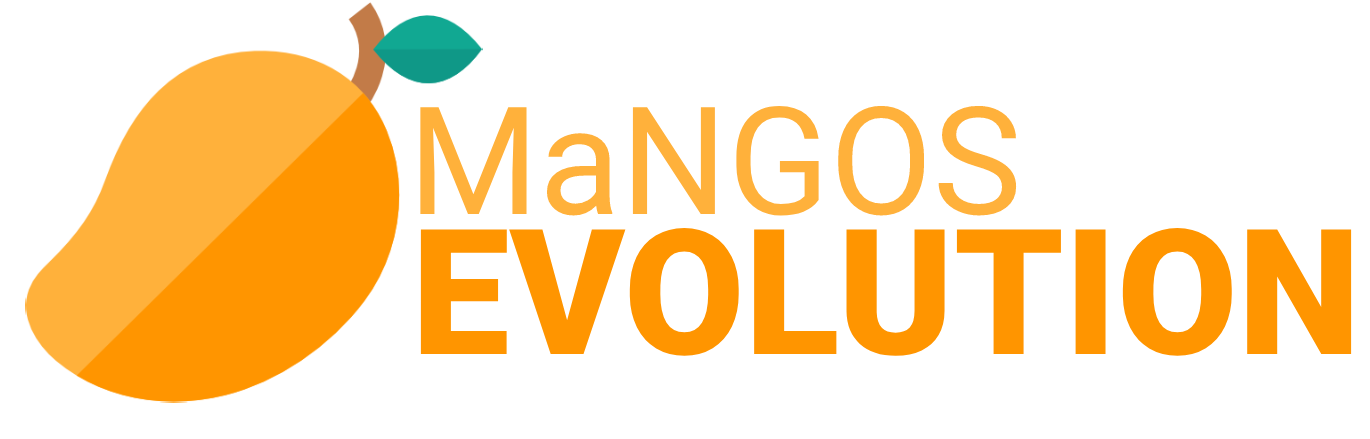
<style>
.page{position:relative;width:1370px;height:439px;background:#ffffff}
.page>*{position:absolute;margin:0}
.t1{font:150px "Roboto-Regular";color:#ffb13b}
.t2{font:175px "Roboto-Black";color:#ff9500}
</style>
<div class="page">
<p class="t1" style="left:420px;top:105px;width:597px;height:111px">MaNGOS</p>
<p class="t2" style="left:420px;top:227px;width:932px;height:129px">EVOLUTION</p>
</div>
